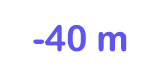
<style>
.page{position:relative;width:160px;height:75px;background:#ffffff}
.page>*{position:absolute;margin:0}
.t1{font:36px "ArialRoundedMTBold";color:#5f54f1}
</style>
<div class="page">
<p class="t1" style="left:33px;top:24px;width:94px;height:28px">-40 m</p>
</div>
